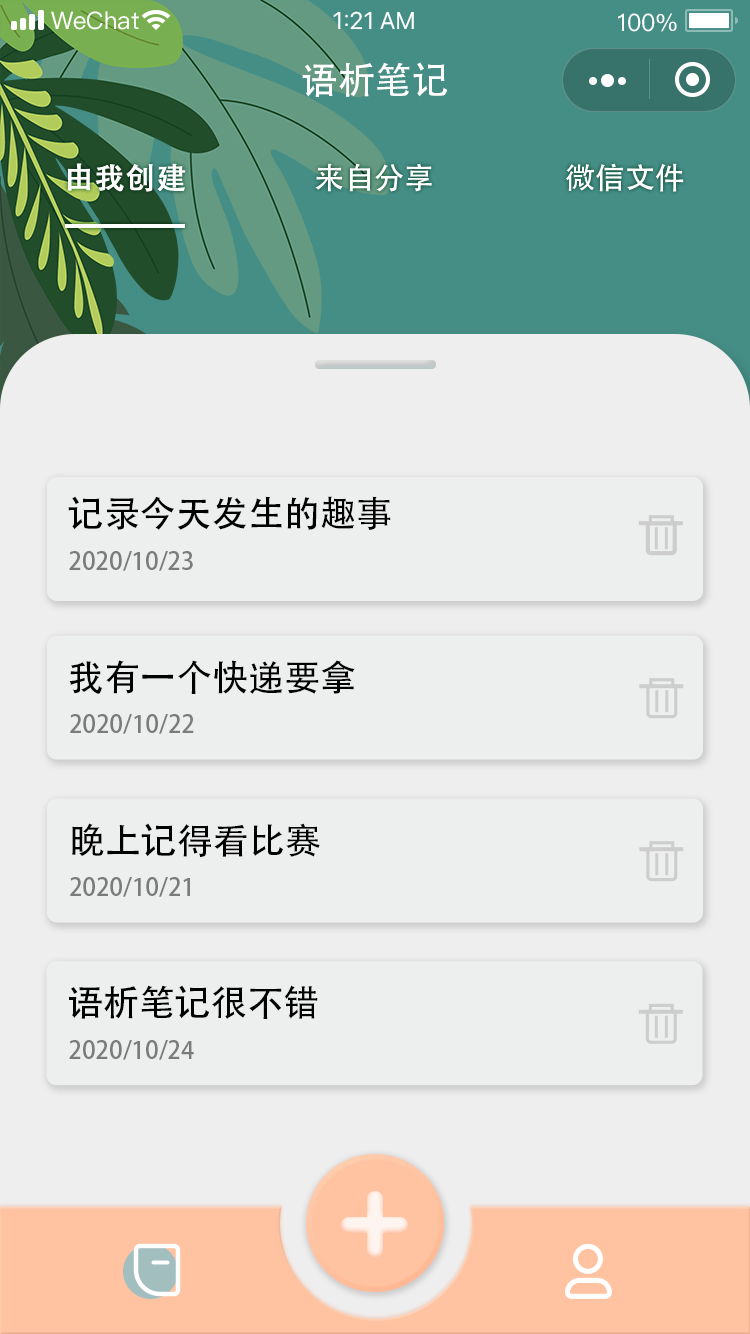
<style>
.page{position:relative;width:750px;height:1334px;background:#edeeee}
.page>*{position:absolute;margin:0}
.t1{font:37px "AdobeHeitiStd-Regular";color:#ffffff}
.t2{font:30px "AdobeHeitiStd-Regular";color:#ffffff;font-weight:bold}
.t3{font:30px "AdobeHeitiStd-Regular";color:#ffffff}
.t4{font:36px "AdobeHeitiStd-Regular";color:#000000}
.t5{font:24px "AdobeHeitiStd-Regular";color:#7b7b7b}
</style>
<div class="page">
<p class="t1" style="left:302px;top:62px;width:146px;height:35px">语析笔记</p>
<p class="t2" style="left:67px;top:163px;width:119px;height:29px">由我创建</p>
<p class="t3" style="left:315px;top:163px;width:117px;height:29px">来自分享</p>
<p class="t3" style="left:566px;top:163px;width:118px;height:29px">微信文件</p>
<p class="t4" style="left:68px;top:496px;width:323px;height:34px">记录今天发生的趣事</p>
<p class="t5" style="left:69px;top:551px;width:124px;height:20px">2020/10/23</p>
<p class="t4" style="left:69px;top:660px;width:286px;height:34px">我有一个快递要拿</p>
<p class="t5" style="left:70px;top:714px;width:124px;height:20px">2020/10/22</p>
<p class="t4" style="left:72px;top:823px;width:248px;height:35px">晚上记得看比赛</p>
<p class="t5" style="left:70px;top:877px;width:120px;height:20px">2020/10/21</p>
<p class="t4" style="left:69px;top:985px;width:249px;height:34px">语析笔记很不错</p>
<p class="t5" style="left:69px;top:1040px;width:125px;height:20px">2020/10/24</p>
</div>
